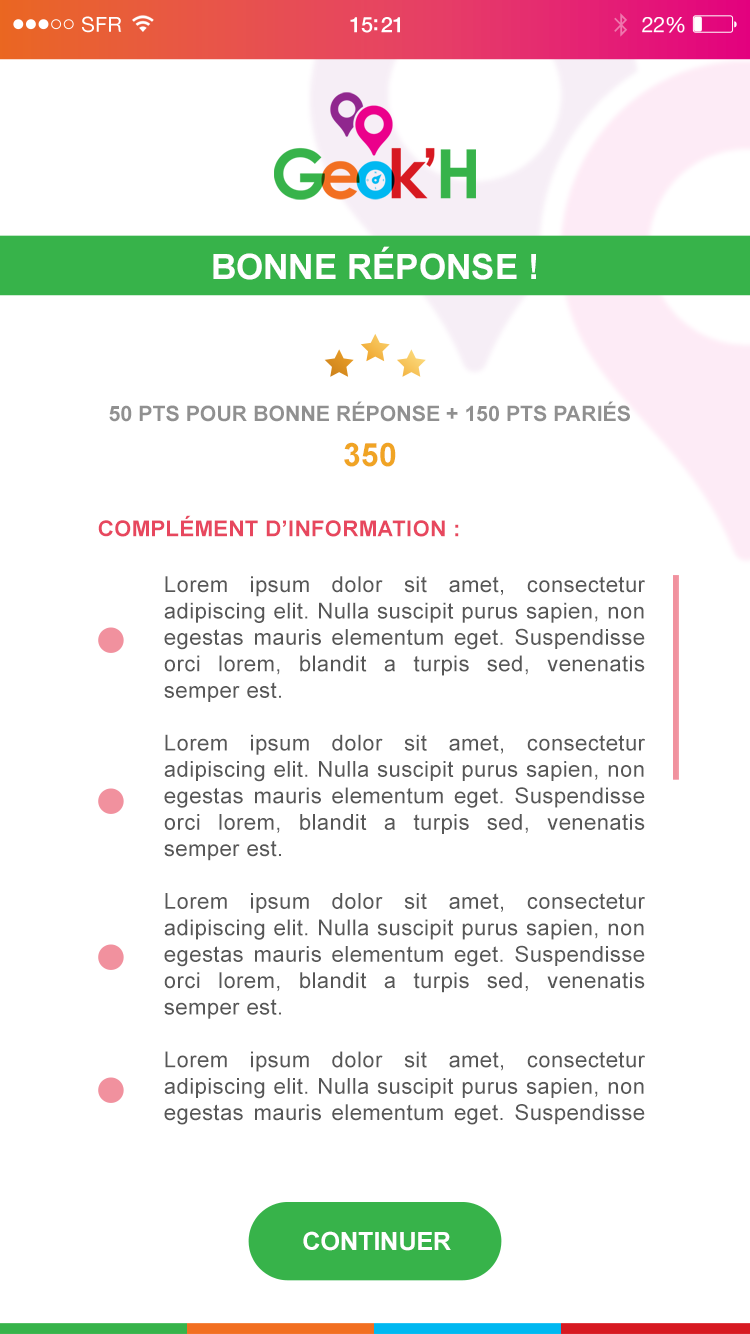
<style>
.page{position:relative;width:750px;height:1334px;background:#ffffff}
.page>*{position:absolute;margin:0}
.t1{font:35px "Arial-BoldMT";color:#ffffff}
.t2{font:21.3px "Arial-BoldMT";color:#909090}
.t3{font:32px "Arial-BoldMT";color:#f0a424}
.t4{font:22px "Arial-BoldMT";letter-spacing:0.02em;color:#e7475e}
.t5{font:22px "ArialMT";letter-spacing:0.02em;color:#575757}
.t6{font:25px "Arial-BoldMT";color:#ffffff}
</style>
<div class="page">
<p class="t1" style="left:213px;top:246px;width:323px;height:34px">BONNE RÉPONSE !</p>
<p class="t2" style="left:109px;top:401px;width:521px;height:21px">50 PTS POUR BONNE RÉPONSE + 150 PTS PARIÉS</p>
<p class="t3" style="left:344px;top:442px;width:52px;height:25px">350</p>
<p class="t4" style="left:98px;top:515px;width:361px;height:22px">COMPLÉMENT D’INFORMATION :</p>
<p class="t5" style="left:164px;top:576px;width:481px;height:549px"><span class="t4"><br></span><br>Lorem ipsum dolor sit amet, consectetur adipiscing elit. Nulla suscipit purus sapien, non egestas mauris elementum eget. Suspendisse orci lorem, blandit a turpis sed, venenatis semper est.<br><br>Lorem ipsum dolor sit amet, consectetur adipiscing elit. Nulla suscipit purus sapien, non egestas mauris elementum eget. Suspendisse orci lorem, blandit a turpis sed, venenatis semper est.<br><br>Lorem ipsum dolor sit amet, consectetur adipiscing elit. Nulla suscipit purus sapien, non egestas mauris elementum eget. Suspendisse orci lorem, blandit a turpis sed, venenatis semper est.<br><br>Lorem ipsum dolor sit amet, consectetur adipiscing elit. Nulla suscipit purus sapien, non egestas mauris elementum eget. Suspendisse orci lorem, blandit a turpis sed, venenatis semper est. Nulla suscipit purus sapien, non egestas mauris elementum eget. Suspendisse orci lorem, blandit a turpis sed, venenatis semper est.</p>
<p class="t6" style="left:303px;top:1231px;width:148px;height:20px">CONTINUER</p>
</div>
